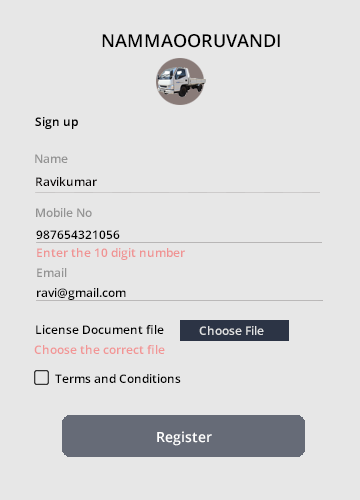
<style>
.page{position:relative;width:360px;height:500px;background:#e7e7e7}
.page>*{position:absolute;margin:0}
.t1{font:18px "OpenSans-Semibold";color:#000000}
.t2{font:12px "OpenSans-Semibold";color:#939393}
.t3{font:12px "OpenSans-Semibold";color:#040000}
.t4{font:12px "OpenSans-Semibold";color:#000000}
.t5{font:12px "OpenSans-Semibold";color:#f09393}
.t6{font:12px "OpenSans-Semibold";color:#e0e1e2}
.t7{font:12px "OpenSans-Semibold";color:#f29595}
.t8{font:14px "OpenSans-Semibold";color:#ffffff}
</style>
<div class="page">
<p class="t1" style="left:102px;top:34px;width:178px;height:14px">NAMMAOORUVANDI</p>
<p class="t2" style="left:35px;top:154px;width:33px;height:9px">Name</p>
<p class="t3" style="left:36px;top:177px;width:61px;height:9px">Ravikumar</p>
<p class="t2" style="left:36px;top:208px;width:56px;height:9px">Mobile No</p>
<p class="t4" style="left:36px;top:230px;width:84px;height:9px">987654321056</p>
<p class="t5" style="left:37px;top:248px;width:148px;height:12px">Enter the 10 digit number</p>
<p class="t2" style="left:37px;top:268px;width:30px;height:9px">Email</p>
<p class="t4" style="left:37px;top:288px;width:89px;height:12px">ravi@gmail.com</p>
<p class="t4" style="left:36px;top:325px;width:128px;height:9px">License Document file</p>
<p class="t6" style="left:199px;top:326px;width:65px;height:9px">Choose File</p>
<p class="t7" style="left:34px;top:345px;width:131px;height:9px">Choose the correct file</p>
<p class="t4" style="left:55px;top:374px;width:126px;height:9px">Terms and Conditions</p>
<p class="t8" style="left:157px;top:431px;width:55px;height:15px">Register</p>
</div>
